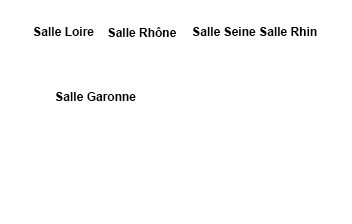
<style>
.page{position:relative;width:352px;height:224px;background:#ffffff}
.page>*{position:absolute;margin:0}
.t1{font:12px "Arial-BoldMT";color:#000000}
</style>
<div class="page">
<p class="t1" style="left:33px;top:27px;width:61px;height:9px">Salle Loire</p>
<p class="t1" style="left:108px;top:27px;width:69px;height:10px">Salle Rhône</p>
<p class="t1" style="left:192px;top:27px;width:64px;height:9px">Salle Seine</p>
<p class="t1" style="left:259px;top:27px;width:58px;height:9px">Salle Rhin</p>
<p class="t1" style="left:55px;top:92px;width:81px;height:9px">Salle Garonne</p>
</div>
